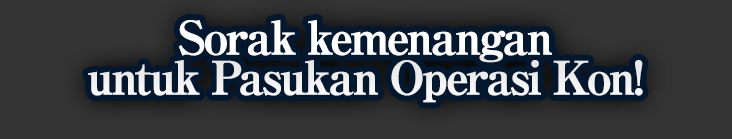
<style>
.page{position:relative;width:732px;height:139px;background:#333333}
.page>*{position:absolute;margin:0}
.t1{font:46px/40px "RyuminPro-ExBold";letter-spacing:-0.08em;color:#ffffff;font-weight:bold}
</style>
<div class="page">
<p class="t1" style="left:88px;top:20px;width:555px;height:83px;text-align:center">Sorak kemenangan<br>untuk Pasukan Operasi Kon!</p>
</div>
